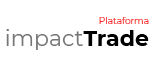
<style>
.page{position:relative;width:156px;height:67px;background:#ffffff}
.page>*{position:absolute;margin:0}
.t1{font:9px "Montserrat-Regular";color:#fa2d2d}
.t2{font:22px "Montserrat-Regular";color:#757575}
.t3{font:22px "Montserrat-Bold";color:#000000}
</style>
<div class="page">
<p class="t1" style="left:99px;top:17px;width:50px;height:7px">Plataforma</p>
<p class="t2" style="left:6px;top:29px;width:143px;height:21px">impact<span class="t3">Trade</span></p>
</div>
